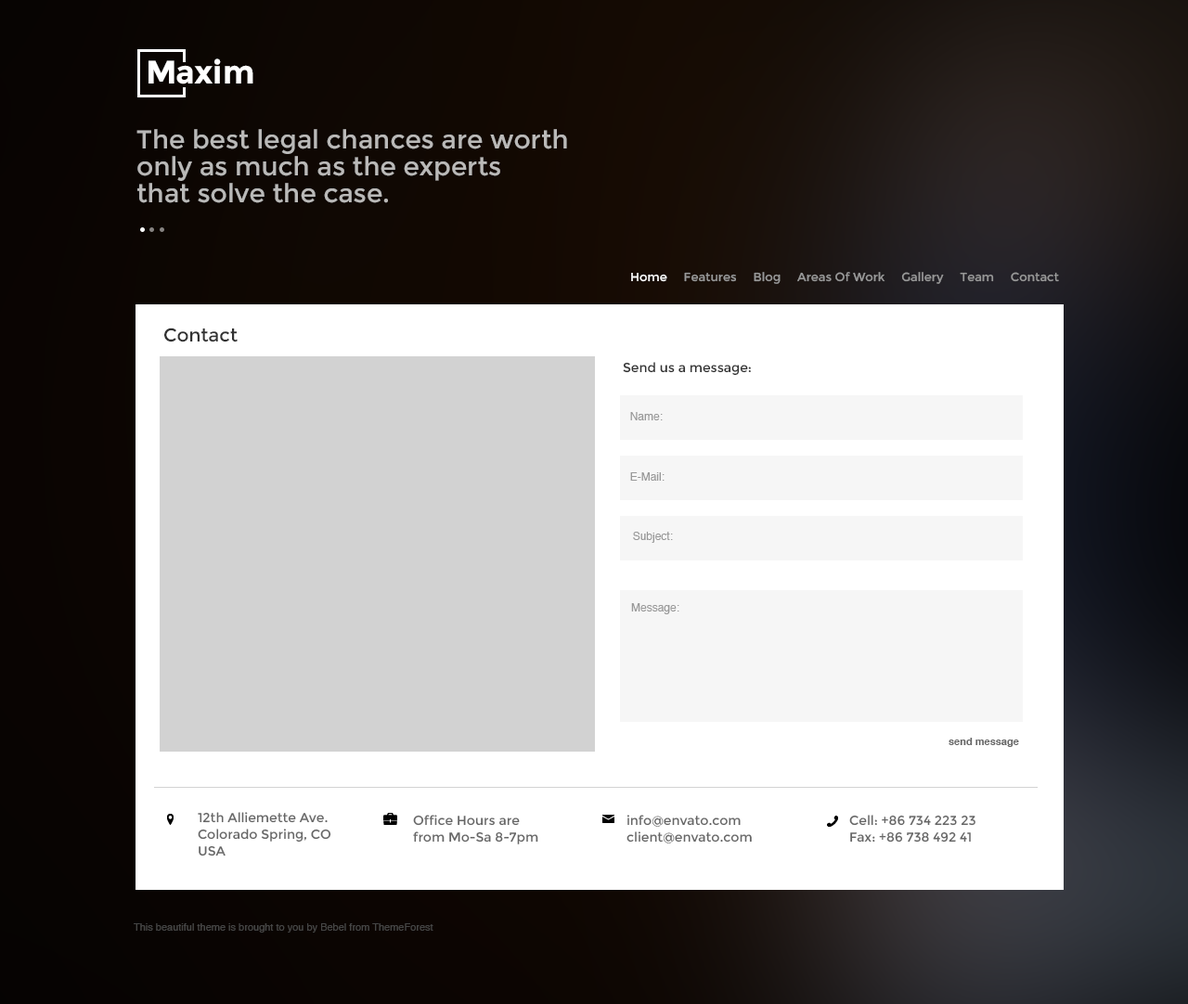
<style>
.page{position:relative;width:1188px;height:1004px;background:#ffffff}
.page>*{position:absolute;margin:0}
.t1{font:32.5px "Montserrat-Bold";color:#ffffff}
.t2{font:26px/26.9px "Montserrat-Regular";color:#bab9b8}
.t3{font:12.1px "Montserrat-Regular";color:#999999}
.t4{font:12.1px "Montserrat-Regular";color:#ffffff}
.t5{font:18.6px "Montserrat-Regular";color:#323232}
.t6{font:13px "Montserrat-Regular";color:#323232}
.t7{font:11.1px "Helvetica";color:#999999}
.t8{font:10.2px "Helvetica-Bold";color:#666666}
.t9{font:13px/16.7px "Montserrat-Regular";color:#666666}
.t10{font:10.2px "Helvetica";color:#454545}
</style>
<div class="page">
<p class="t1" style="left:148px;top:60px;width:26px;height:24px">M</p>
<p class="t1" style="left:194px;top:58px;width:59px;height:26px">xim</p>
<p class="t2" style="left:136px;top:129px;width:431px;height:74px">The best legal chances are worth <br>only as much as the experts <br>that solve the case.</p>
<p class="t3" style="left:631px;top:272px;width:428px;height:12px"><span class="t4">Home     </span>Features     Blog     Areas Of Work     Gallery     Team     Contact</p>
<p class="t5" style="left:164px;top:328px;width:74px;height:14px">Contact</p>
<p class="t6" style="left:623px;top:362px;width:128px;height:14px">Send us a message:</p>
<p class="t7" style="left:630px;top:412px;width:33px;height:8px">Name:</p>
<p class="t7" style="left:630px;top:472px;width:34px;height:9px">E-Mail:</p>
<p class="t7" style="left:633px;top:532px;width:40px;height:11px">Subject:</p>
<p class="t7" style="left:631px;top:603px;width:48px;height:11px">Message:</p>
<p class="t8" style="left:948px;top:738px;width:71px;height:9px">send message</p>
<p class="t9" style="left:198px;top:812px;width:133px;height:44px">12th Alliemette Ave.<br>Colorado Spring, CO<br>USA</p>
<p class="t9" style="left:413px;top:815px;width:125px;height:29px">Office Hours are<br>from Mo-Sa 8-7pm</p>
<p class="t9" style="left:626px;top:815px;width:126px;height:28px">info@envato.com<br>client@envato.com</p>
<p class="t9" style="left:849px;top:815px;width:126px;height:28px">Cell: +86 734 223 23<br>Fax: +86 738 492 41</p>
<p class="t10" style="left:134px;top:923px;width:299px;height:10px">This beautiful theme is brought to you by Bebel from ThemeForest</p>
</div>
